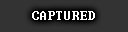
<style>
.page{position:relative;width:128px;height:32px;background:#333333}
.page>*{position:absolute;margin:0}
.t1{font:12px "Terminal";color:#ffffff}
</style>
<div class="page">
<p class="t1" style="left:32px;top:11px;width:63px;height:9px">CAPTURED</p>
</div>
